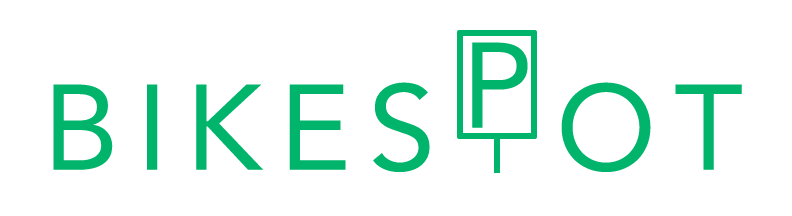
<style>
.page{position:relative;width:792px;height:216px;background:#ffffff}
.page>*{position:absolute;margin:0}
.t1{font:120px "Avenir-Roman";letter-spacing:0.15em;color:#00b46c}
</style>
<div class="page">
<p class="t1" style="left:472px;top:42px;width:56px;height:86px">P</p>
<p class="t1" style="left:53px;top:82px;width:689px;height:90px">BIKES  OT</p>
</div>
